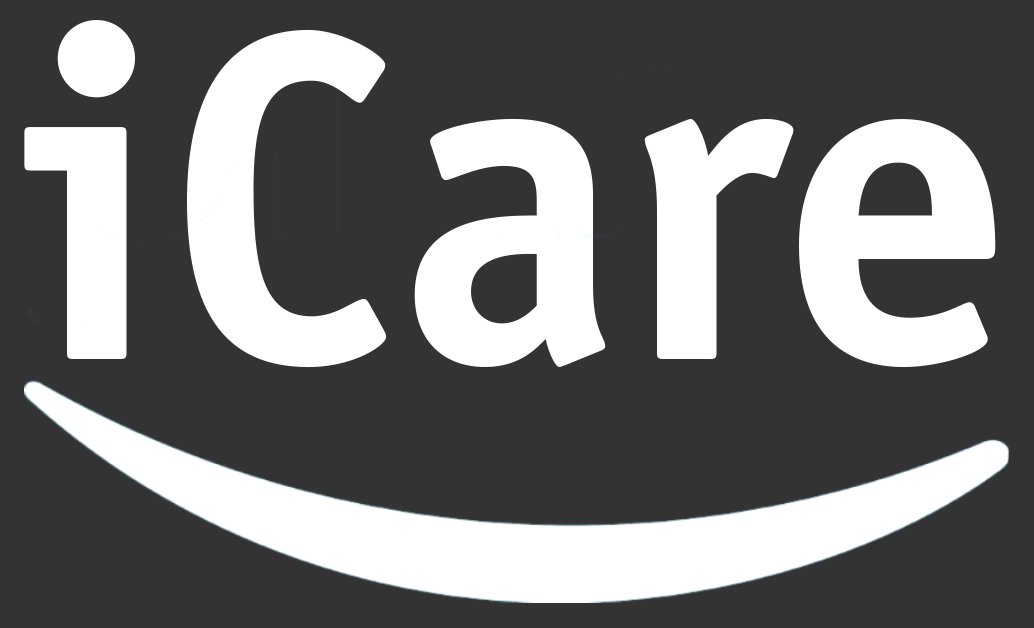
<style>
.page{position:relative;width:1034px;height:628px;background:#333333}
.page>*{position:absolute;margin:0}
.t1{font:468.8px "OfficinaSansStd-Bold";color:#ffffff}
</style>
<div class="page">
<p class="t1" style="left:24px;top:20px;width:972px;height:348px">iCare</p>
</div>
